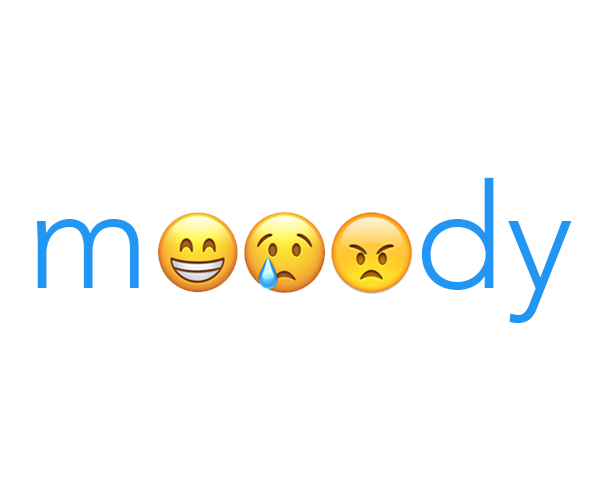
<style>
.page{position:relative;width:600px;height:500px;background:#ffffff}
.page>*{position:absolute;margin:0}
.t1{font:145.8px "Avenir-Light"}
.t2{font:145.8px "Avenir-Light";letter-spacing:0.025em}
</style>
<div class="page">
<p class="t1" style="left:36px;top:177px;width:536px;height:146px"><span class="t2">m</span>ooo<span class="t2">dy</span></p>
</div>
